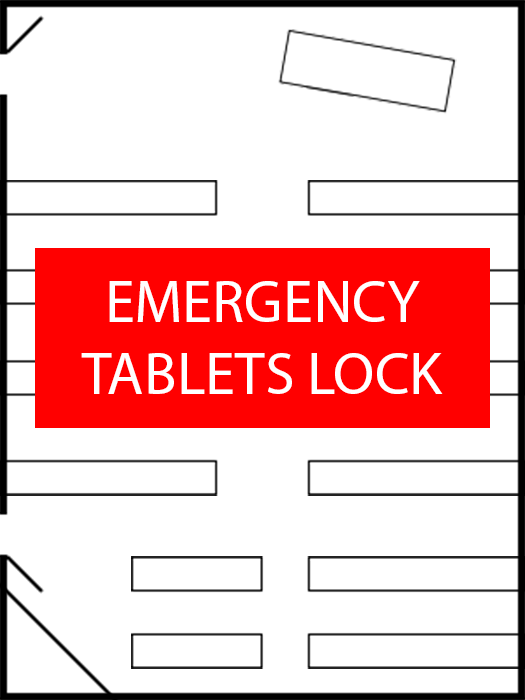
<style>
.page{position:relative;width:525px;height:700px;background:#ffffff}
.page>*{position:absolute;margin:0}
.t1{font:60px "MyriadPro-Regular";color:#ffffff}
</style>
<div class="page">
<p class="t1" style="left:81px;top:281px;width:362px;height:113px;text-align:center">EMERGENCY<br>TABLETS LOCK</p>
</div>
